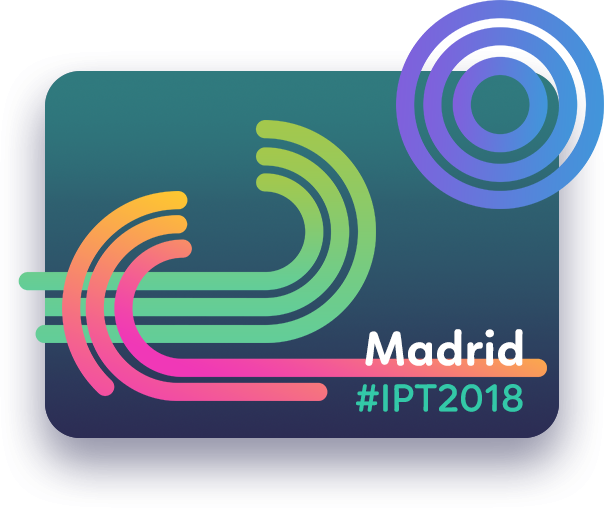
<style>
.page{position:relative;width:604px;height:508px}
.page>*{position:absolute;margin:0}
.t1{font:50px "Linotte-Bold";color:#ffffff}
.t2{font:40px "Linotte-SemiBold";color:#33c8a8}
</style>
<div class="page">
<p class="t1" style="left:365px;top:329px;width:158px;height:37px">Madrid</p>
<p class="t2" style="left:356px;top:384px;width:167px;height:28px">#IPT2018</p>
</div>
